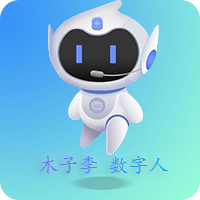
<style>
.page{position:relative;width:200px;height:200px}
.page>*{position:absolute;margin:0}
.t1{font:20px "KaiTi"}
</style>
<div class="page">
<p class="t1" style="left:40px;top:156px;width:128px;height:18px">木子李 数字人</p>
</div>
